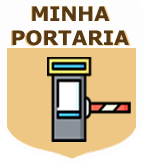
<style>
.page{position:relative;width:143px;height:166px;background:#edc783}
.page>*{position:absolute;margin:0}
.t1{font:20.6px "Verdana-Bold";color:#583916}
.t2{font:20px "Verdana-Bold";color:#583916}
</style>
<div class="page">
<p class="t1" style="left:11px;top:6px;width:120px;height:40px;text-align:center">MINHA<br>PORTARIA</p>
<p class="t2" style="left:12px;top:6px;width:117px;height:40px;text-align:center">MINHA<br>PORTARIA</p>
</div>
